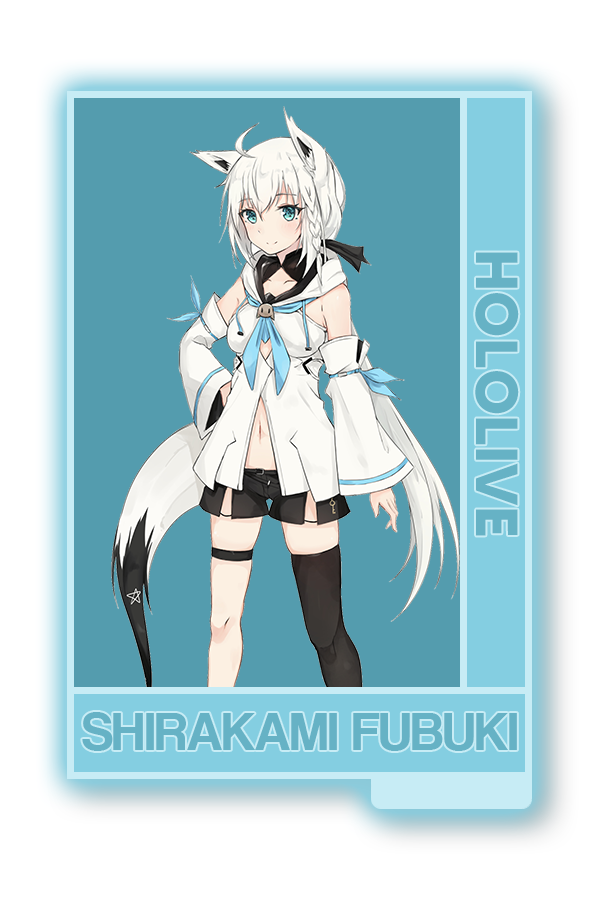
<style>
.page{position:relative;width:600px;height:900px;background:#549cae}
.page>*{position:absolute;margin:0}
.t1{font:59.2px "MADETOMMY-Bold";color:#66b2c5}
.t2{font:54.8px "CoolveticaRg-Regular";color:#66b2c5}
</style>
<div class="page">
<p class="t1" style="left:475px;top:252px;width:44px;height:284px;rotate:90deg">HOLOLIVE</p>
<p class="t2" style="left:82px;top:712px;width:435px;height:39px">SHIRAKAMI FUBUKI</p>
</div>
